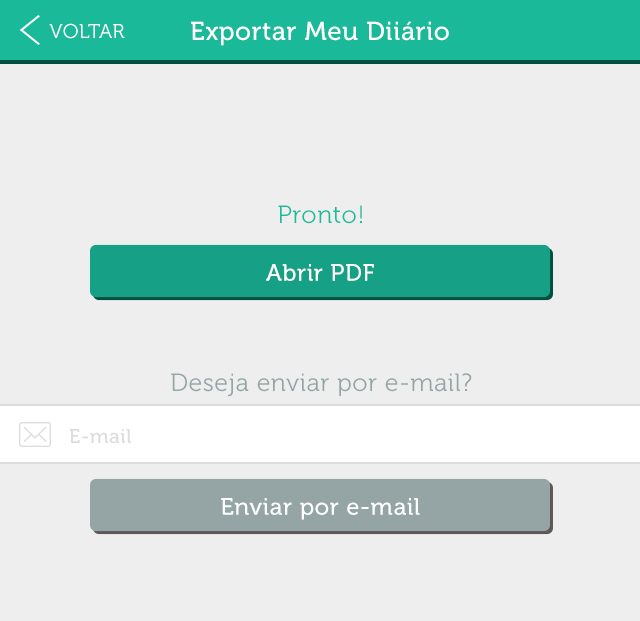
<style>
.page{position:relative;width:640px;height:621px;background:#eeeeee}
.page>*{position:absolute;margin:0}
.t1{font:20px "Museo300-Regular";letter-spacing:0.02em;color:#ffffff;text-transform:uppercase}
.t2{font:26px "Museo500-Regular";letter-spacing:0.02em;color:#ffffff}
.t3{font:25px "Museo300-Regular";letter-spacing:0.02em;color:#1abc9c}
.t4{font:23.8px "Museo500-Regular";letter-spacing:0.02em;color:#ffffff}
.t5{font:25px "Museo300-Regular";letter-spacing:0.02em;color:#95a5a6}
.t6{font:20px "Museo500-Regular";letter-spacing:0.02em;color:#dddddd}
</style>
<div class="page">
<p class="t1" style="left:49px;top:23px;width:76px;height:16px">Voltar</p>
<p class="t2" style="left:191px;top:21px;width:258px;height:25px">Exportar Meu Diiário</p>
<p class="t3" style="left:278px;top:205px;width:84px;height:19px">Pronto!</p>
<p class="t4" style="left:266px;top:264px;width:108px;height:17px">Abrir PDF</p>
<p class="t5" style="left:171px;top:373px;width:301px;height:24px">Deseja enviar por e-mail?</p>
<p class="t6" style="left:69px;top:429px;width:62px;height:15px">E-mail</p>
<p class="t4" style="left:221px;top:498px;width:199px;height:22px">Enviar por e-mail</p>
</div>
